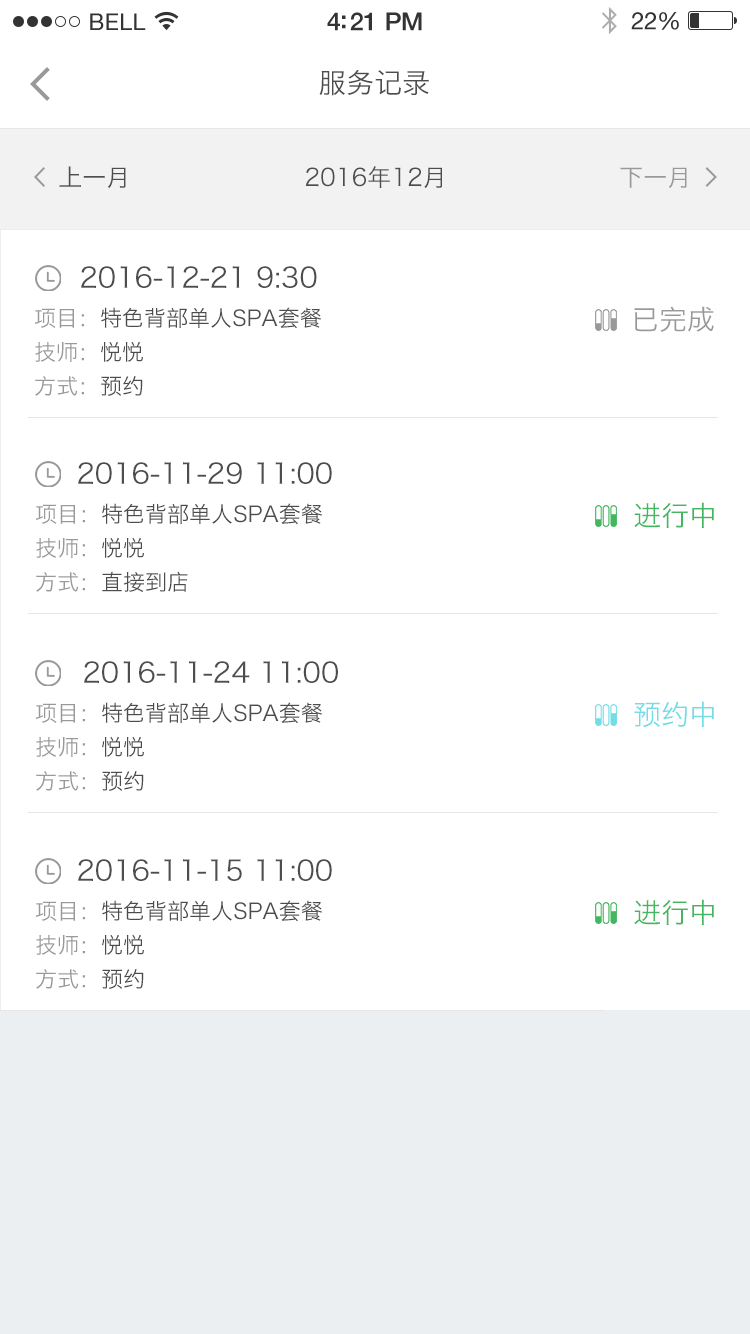
<style>
.page{position:relative;width:750px;height:1334px;background:#ffffff}
.page>*{position:absolute;margin:0}
.t1{font:28px "HiraginoSansGB-W3";color:#4d4d4d}
.t2{font:24px "HiraginoSansGB-W3";color:#4d4d4d}
.t3{font:24px "HiraginoSansGB-W3";color:#999999}
.t4{font:22px "HiraginoSansGB-W3";color:#4c4c4c}
.t5{font:22px/34px "HiraginoSansGB-W3";color:#999999}
.t6{font:22px/34px "HiraginoSansGB-W3";color:#4c4c4c}
.t7{font:28px "HiraginoSansGB-W3";color:#999999}
.t8{font:28px "HiraginoSansGB-W3";color:#44b65f}
.t9{font:28px "HiraginoSansGB-W3";color:#73dce6}
</style>
<div class="page">
<p class="t1" style="left:319px;top:70px;width:110px;height:26px">服务记录</p>
<p class="t2" style="left:59px;top:166px;width:67px;height:23px">上一月</p>
<p class="t2" style="left:305px;top:166px;width:137px;height:23px">2016年12月</p>
<p class="t3" style="left:620px;top:167px;width:67px;height:22px">下一月</p>
<p class="t1" style="left:81px;top:266px;width:236px;height:22px">2016-12-21 9:30</p>
<p class="t4" style="left:34px;top:307px;width:287px;height:89px;text-align:justify"><span class="t5">项目：</span>特色背部单人SPA套餐<br><span class="t5">技师：</span><span class="t6">悦悦<br></span><span class="t5">方式：</span><span class="t6">预约</span></p>
<p class="t7" style="left:634px;top:306px;width:80px;height:26px">已完成</p>
<p class="t1" style="left:78px;top:462px;width:254px;height:22px">2016-11-29 11:00</p>
<p class="t4" style="left:35px;top:503px;width:287px;height:89px;text-align:justify"><span class="t5">项目：</span>特色背部单人SPA套餐<br><span class="t5">技师：</span><span class="t6">悦悦<br></span><span class="t5">方式：</span><span class="t6">直接到店</span></p>
<p class="t8" style="left:634px;top:502px;width:80px;height:26px">进行中</p>
<p class="t1" style="left:84px;top:661px;width:254px;height:22px">2016-11-24 11:00</p>
<p class="t4" style="left:35px;top:702px;width:287px;height:89px;text-align:justify"><span class="t5">项目：</span>特色背部单人SPA套餐<br><span class="t5">技师：</span><span class="t6">悦悦<br></span><span class="t5">方式：</span><span class="t6">预约</span></p>
<p class="t9" style="left:634px;top:701px;width:80px;height:27px">预约中</p>
<p class="t1" style="left:78px;top:859px;width:254px;height:22px">2016-11-15 11:00</p>
<p class="t4" style="left:35px;top:900px;width:287px;height:89px;text-align:justify"><span class="t5">项目：</span>特色背部单人SPA套餐<br><span class="t5">技师：</span><span class="t6">悦悦<br></span><span class="t5">方式：</span><span class="t6">预约</span></p>
<p class="t8" style="left:634px;top:899px;width:80px;height:26px">进行中</p>
</div>
